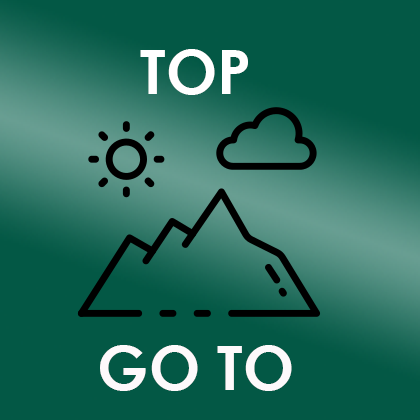
<style>
.page{position:relative;width:420px;height:420px;background:#035845}
.page>*{position:absolute;margin:0}
.t1{font:61.3px "CenturyGothic-Bold";color:#ffffff}
.t2{font:61.3px "CenturyGothic-Bold";color:#fdf9fb}
</style>
<div class="page">
<p class="t1" style="left:140px;top:49px;width:108px;height:46px">TOP</p>
<p class="t2" style="left:100px;top:345px;width:192px;height:46px">GO TO</p>
</div>
